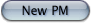
<style>
.page{position:relative;width:91px;height:24px}
.page>*{position:absolute;margin:0}
.t1{font:12.5px "LucidaGrande";color:#000000}
</style>
<div class="page">
<p class="t1" style="left:22px;top:5px;width:46px;height:10px">New PM</p>
</div>
